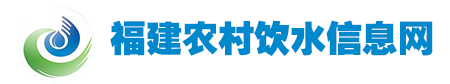
<style>
.page{position:relative;width:450px;height:84px;background:#ffffff}
.page>*{position:absolute;margin:0}
.t1{font:36px "SiCChaoCuHei-M10S";color:#0088cd}
</style>
<div class="page">
<p class="t1" style="left:110px;top:20px;width:323px;height:36px">福建农村饮水信息网</p>
</div>
